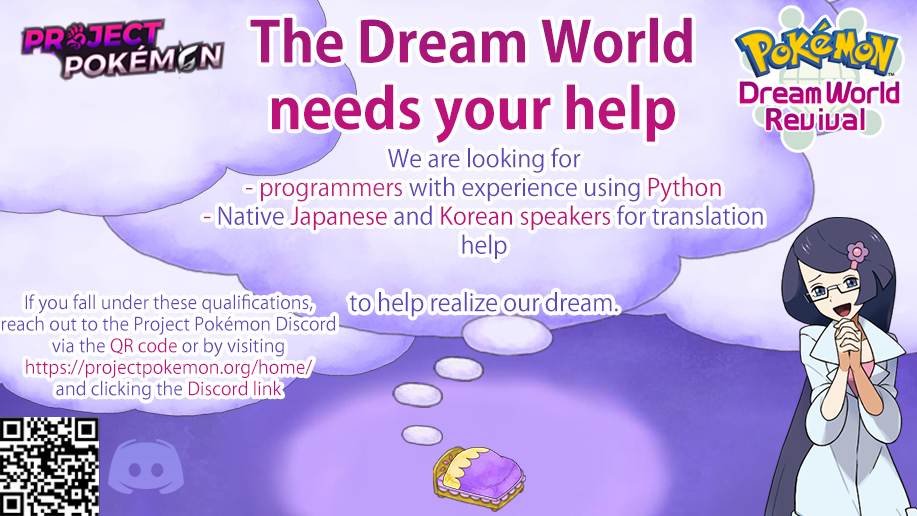
<style>
.page{position:relative;width:917px;height:516px}
.page>*{position:absolute;margin:0}
.t1{font:55.5px "KozGoPr6N-Bold";color:#bd0378}
.t2{font:24px "KozGoPr6N-Regular";color:#5c48bd}
.t3{font:24px "KozGoPr6N-Regular";color:#c41e80}
.t4{font:24px "KozGoPr6N-Regular";color:#c2107b}
.t5{font:18px "KozGoPr6N-Regular";color:#5c48bd}
.t6{font:18px "KozGoPr6N-Regular";color:#c2107b}
.t7{font:18px "KozGoPr6N-Regular";color:#c1107b}
</style>
<div class="page">
<p class="t1" style="left:250px;top:17px;width:442px;height:126px;text-align:center">The Dream World <br>needs your help</p>
<p class="t2" style="left:204px;top:147px;width:559px;height:170px;text-align:center">We are looking for <br><span class="t3">- programmers</span> with experience using <span class="t4">Python<br>- </span>Native <span class="t4">Japanese </span>and<span class="t4"> Korean speakers </span>for translation help<br><br>to help realize our dream.</p>
<p class="t5" style="left:2px;top:294px;width:333px;height:106px;text-align:center">If you fall under these qualifications, <br>reach out to the Project Pokémon Discord <br>via the <span class="t6">QR code </span>or by visiting <br><span class="t7">https://projectpokemon.org/home/<br></span>and clicking the <span class="t6">Discord link</span></p>
</div>
